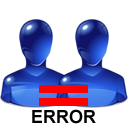
<style>
.page{position:relative;width:128px;height:128px;background:#ffffff}
.page>*{position:absolute;margin:0}
.t1{font:18px "Arial-BoldMT";color:#010101}
</style>
<div class="page">
<p class="t1" style="left:32px;top:109px;width:64px;height:15px">ERROR</p>
</div>
